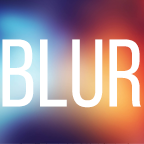
<style>
.page{position:relative;width:144px;height:144px}
.page>*{position:absolute;margin:0}
.t1{font:95.8px "BebasNeueRegular";color:#ffffff}
</style>
<div class="page">
<p class="t1" style="left:2px;top:39px;width:139px;height:69px">Blur</p>
</div>
